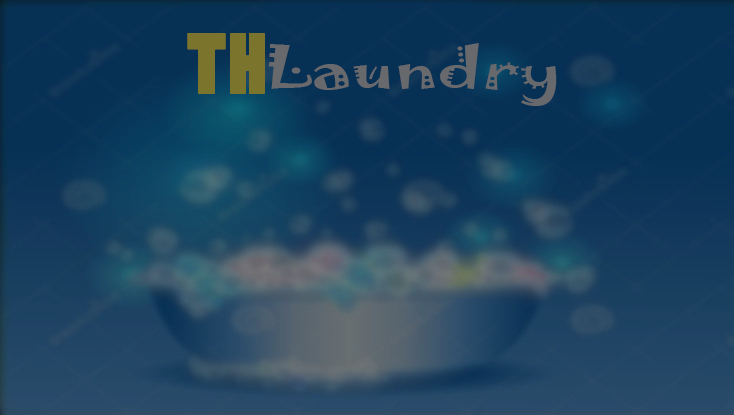
<style>
.page{position:relative;width:734px;height:415px}
.page>*{position:absolute;margin:0}
.t1{font:81.6px "PoplarStd";color:#7a742c;scale:1.05 1}
.t2{font:52.4px "Jokerman-Regular";color:#67696d;scale:1.34 1}
</style>
<div class="page">
<p class="t1" style="left:187px;top:33px;width:78px;height:61px">TH</p>
<p class="t2" style="left:268px;top:43px;width:289px;height:63px">Laundry</p>
</div>
